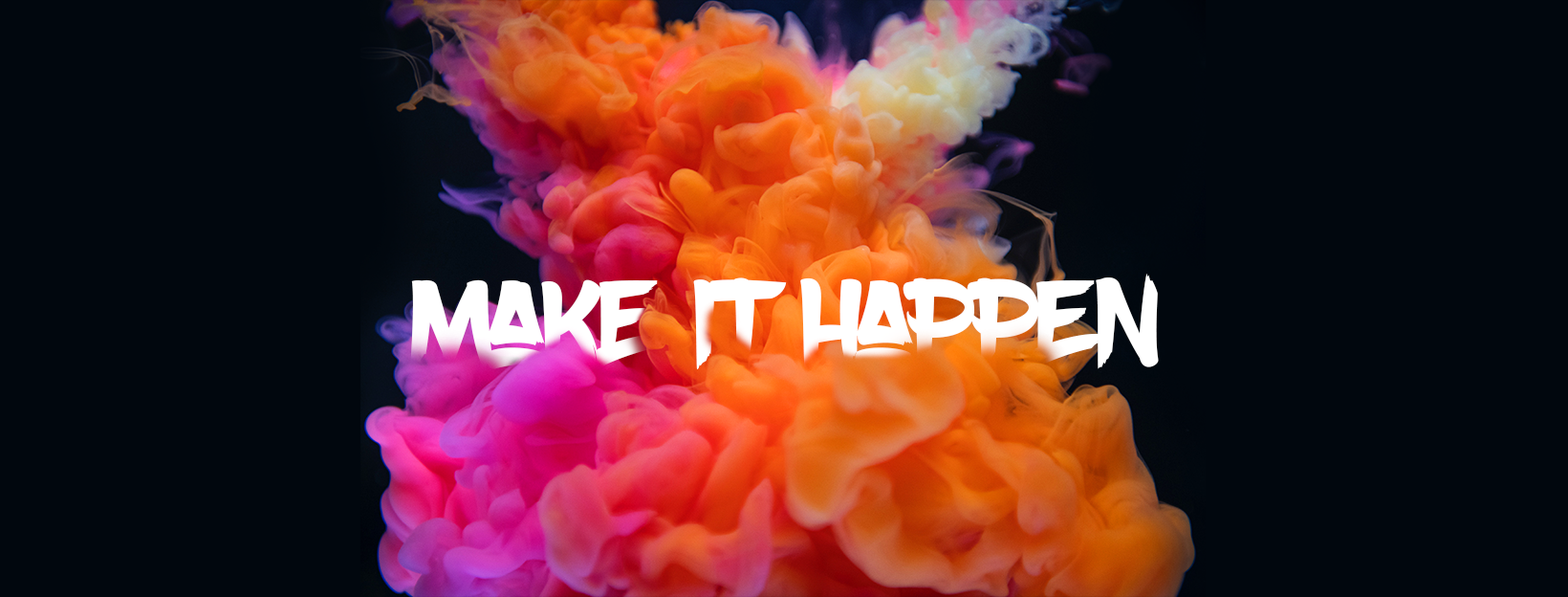
<style>
.page{position:relative;width:1568px;height:597px;background:#01070e}
.page>*{position:absolute;margin:0}
.t1{font:120.5px "BoldBrush";color:#ffffff}
</style>
<div class="page">
<p class="t1" style="left:410px;top:273px;width:749px;height:96px">Make it Happen</p>
</div>
